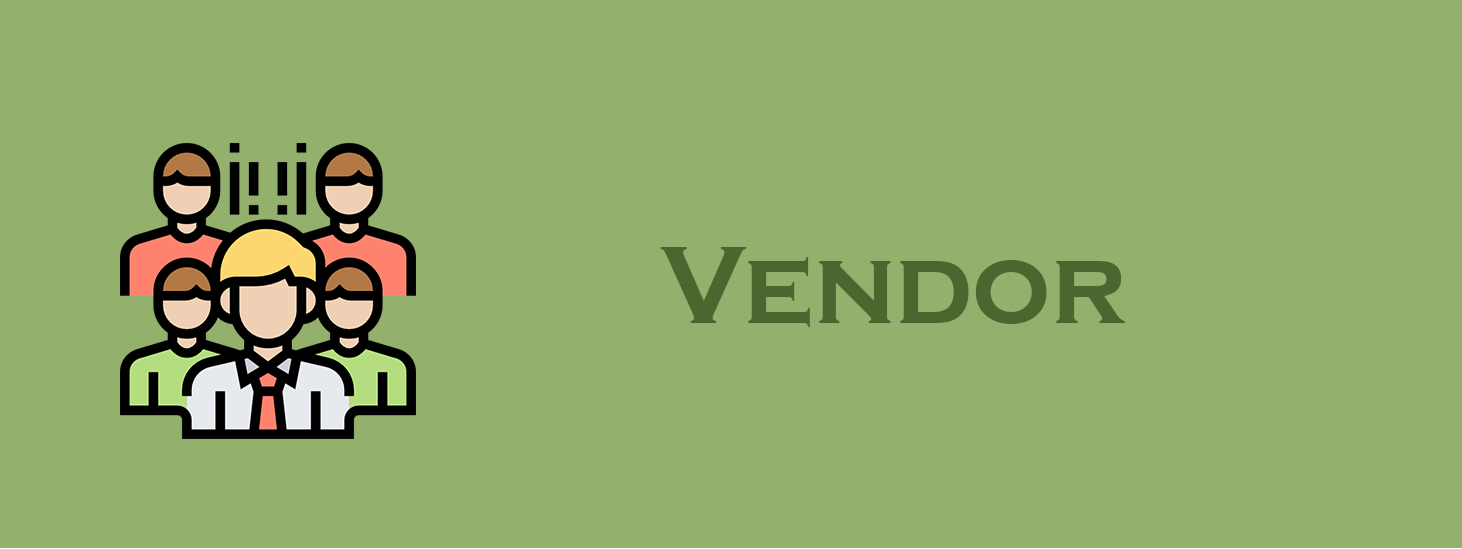
<style>
.page{position:relative;width:1462px;height:549px;background:#93b06c}
.page>*{position:absolute;margin:0}
.t1{font:113.5px "CopperplateGothic-Bold";color:#4d652e;scale:0.97 1}
</style>
<div class="page">
<p class="t1" style="left:660px;top:247px;width:465px;height:80px">Vendor</p>
</div>
